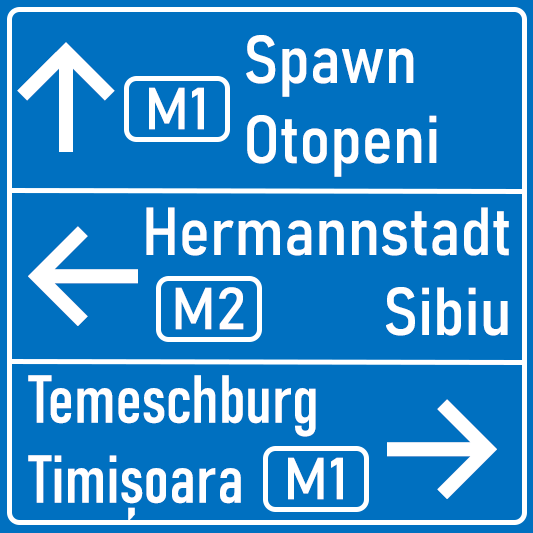
<style>
.page{position:relative;width:533px;height:533px;background:#0070c0}
.page>*{position:absolute;margin:0}
.t1{font:66.7px "Bahnschrift-SemiCondensed";color:#ffffff}
.t2{font:150px "Inter-Medium";color:#ffffff}
.t3{font:58.3px "Bahnschrift";color:#ffffff}
.t4{font:66.7px "Bahnschrift-Condensed";color:#ffffff}
</style>
<div class="page">
<p class="t1" style="left:246px;top:35px;width:191px;height:142px">Spawn<br>Otopeni</p>
<p class="t2" style="left:17px;top:42px;width:98px;height:110px">↑</p>
<p class="t3" style="left:149px;top:87px;width:55px;height:43px">M1</p>
<p class="t1" style="left:146px;top:207px;width:363px;height:129px;text-align:right">Hermannstadt<br>Sibiu</p>
<p class="t2" style="left:28px;top:226px;width:110px;height:100px">←</p>
<p class="t3" style="left:175px;top:287px;width:69px;height:43px">M2</p>
<p class="t4" style="left:28px;top:375px;width:288px;height:147px">Temeschburg<br>Timișoara</p>
<p class="t2" style="left:387px;top:399px;width:110px;height:100px">→</p>
<p class="t3" style="left:288px;top:457px;width:55px;height:43px">M1</p>
</div>
